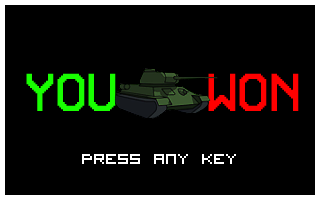
<style>
.page{position:relative;width:320px;height:200px;background:#000000}
.page>*{position:absolute;margin:0}
.t1{font:48px "Retron2000";color:#18ff00}
.t2{font:48px "Retron2000";color:#ff0000}
.t3{font:20px "VisitorTT1BRK";color:#ffffff}
</style>
<div class="page">
<p class="t1" style="left:26px;top:73px;width:90px;height:38px">YOU</p>
<p class="t2" style="left:208px;top:73px;width:91px;height:38px">WON</p>
<p class="t3" style="left:82px;top:154px;width:154px;height:10px">Press Any Key</p>
</div>
